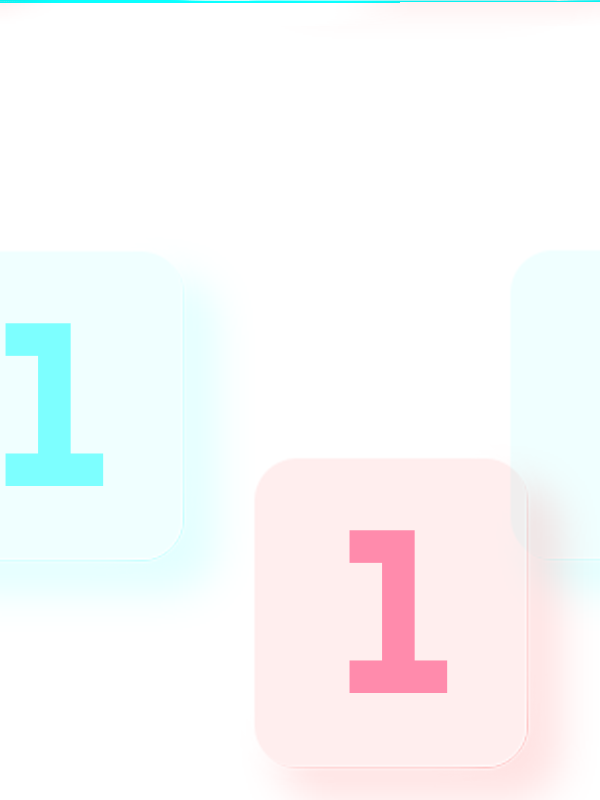
<style>
.page{position:relative;width:600px;height:800px;background:#ffffff}
.page>*{position:absolute;margin:0}
.t1{font:273.4px "Silkscreen";color:#ffffff}
</style>
<div class="page">
<p class="t1" style="left:261px;top:320px;width:99px;height:163px">1</p>
</div>
